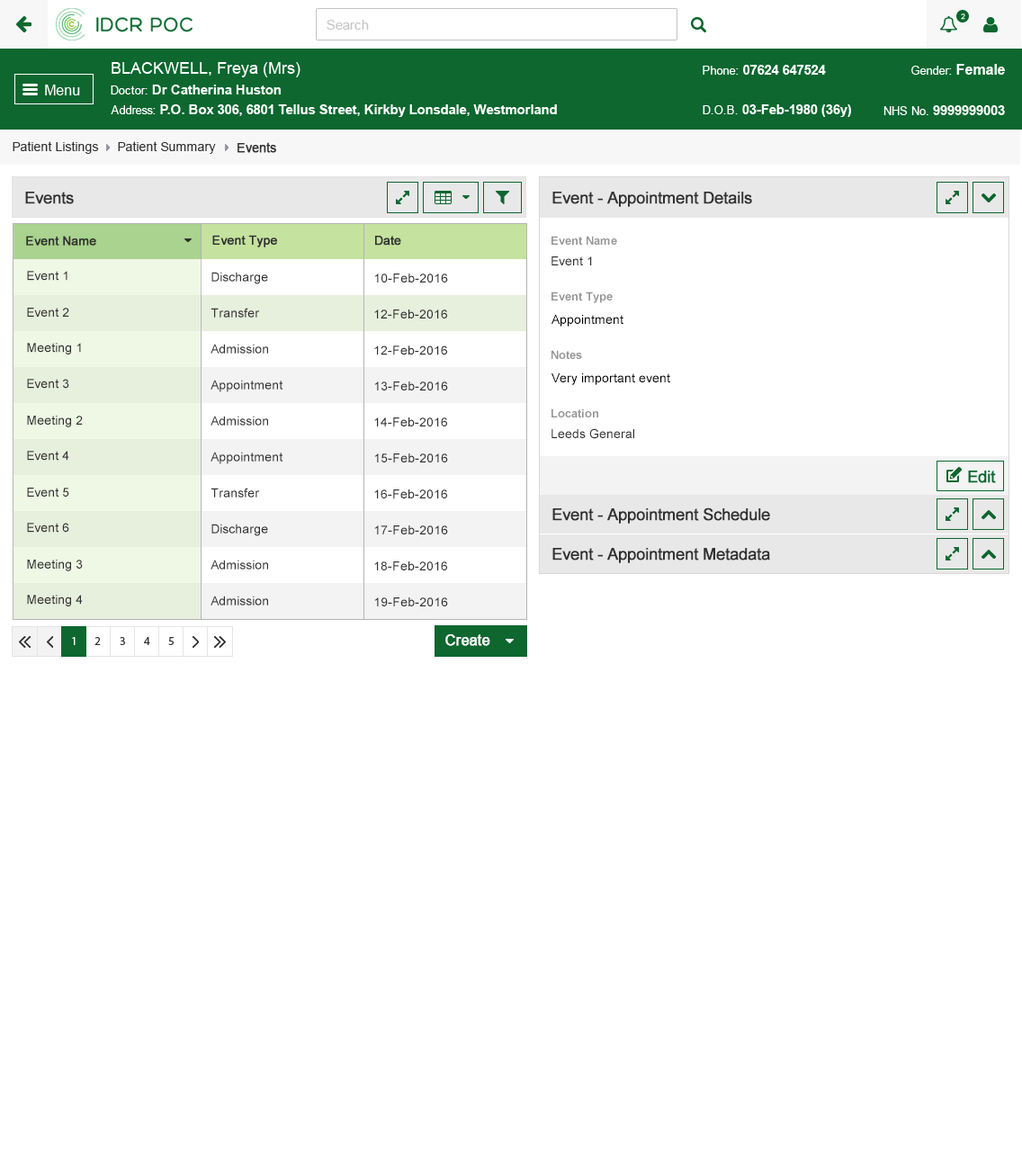
<style>
.page{position:relative;width:1022px;height:1166px;background:#ffffff}
.page>*{position:absolute;margin:0}
.t1{font:12.6px "ArialMT";color:#313131}
.t2{font:12.6px "ArialMT";color:#313131;font-weight:bold}
.t3{font:16.2px "ArialMT";color:#303030;font-weight:bold}
.t4{font:12.6px "ArialMT";color:#303030;font-weight:bold}
.t5{font:11.7px "Arial-BoldMT";color:#959595}
.t6{font:12.6px "ArialMT";color:#303030}
.t7{font:12.6px "ArialMT";color:#000000}
.t8{font:14.4px "ArialMT";color:#ffffff;font-weight:bold}
</style>
<div class="page">
<p class="t1" style="left:13px;top:141px;width:86px;height:13px">Patient Listings</p>
<p class="t1" style="left:118px;top:141px;width:98px;height:13px">Patient Summary</p>
<p class="t2" style="left:238px;top:142px;width:38px;height:11px">Events</p>
<p class="t3" style="left:25px;top:192px;width:49px;height:12px">Events</p>
<p class="t3" style="left:553px;top:192px;width:199px;height:15px">Event - Appointment Details</p>
<p class="t4" style="left:26px;top:236px;width:70px;height:10px">Event Name</p>
<p class="t4" style="left:212px;top:235px;width:65px;height:12px">Event Type</p>
<p class="t4" style="left:375px;top:236px;width:26px;height:10px">Date</p>
<p class="t5" style="left:552px;top:236px;width:65px;height:9px">Event Name</p>
<p class="t6" style="left:552px;top:256px;width:40px;height:9px">Event 1</p>
<p class="t6" style="left:27px;top:271px;width:40px;height:10px">Event 1</p>
<p class="t6" style="left:211px;top:272px;width:57px;height:12px">Discharge</p>
<p class="t6" style="left:374px;top:274px;width:74px;height:9px">10-Feb-2016</p>
<p class="t5" style="left:552px;top:292px;width:61px;height:11px">Event Type</p>
<p class="t6" style="left:27px;top:308px;width:42px;height:9px">Event 2</p>
<p class="t6" style="left:211px;top:308px;width:49px;height:10px">Transfer</p>
<p class="t6" style="left:374px;top:310px;width:73px;height:9px">12-Feb-2016</p>
<p class="t7" style="left:552px;top:315px;width:72px;height:12px">Appointment</p>
<p class="t6" style="left:27px;top:343px;width:54px;height:12px">Meeting 1</p>
<p class="t6" style="left:211px;top:344px;width:57px;height:10px">Admission</p>
<p class="t6" style="left:374px;top:346px;width:73px;height:9px">12-Feb-2016</p>
<p class="t5" style="left:552px;top:350px;width:30px;height:9px">Notes</p>
<p class="t7" style="left:552px;top:373px;width:118px;height:12px">Very important event</p>
<p class="t6" style="left:27px;top:379px;width:42px;height:10px">Event 3</p>
<p class="t6" style="left:211px;top:380px;width:72px;height:12px">Appointment</p>
<p class="t6" style="left:374px;top:382px;width:74px;height:9px">13-Feb-2016</p>
<p class="t5" style="left:552px;top:409px;width:46px;height:9px">Location</p>
<p class="t6" style="left:27px;top:416px;width:56px;height:11px">Meeting 2</p>
<p class="t6" style="left:211px;top:416px;width:57px;height:10px">Admission</p>
<p class="t6" style="left:374px;top:418px;width:73px;height:9px">14-Feb-2016</p>
<p class="t6" style="left:552px;top:428px;width:82px;height:11px">Leeds General</p>
<p class="t6" style="left:27px;top:451px;width:42px;height:10px">Event 4</p>
<p class="t6" style="left:211px;top:452px;width:72px;height:12px">Appointment</p>
<p class="t6" style="left:374px;top:454px;width:74px;height:9px">15-Feb-2016</p>
<p class="t6" style="left:27px;top:488px;width:42px;height:9px">Event 5</p>
<p class="t6" style="left:211px;top:488px;width:49px;height:10px">Transfer</p>
<p class="t6" style="left:374px;top:490px;width:73px;height:9px">16-Feb-2016</p>
<p class="t3" style="left:553px;top:508px;width:217px;height:16px">Event - Appointment Schedule</p>
<p class="t6" style="left:27px;top:523px;width:42px;height:10px">Event 6</p>
<p class="t6" style="left:211px;top:524px;width:57px;height:12px">Discharge</p>
<p class="t6" style="left:374px;top:526px;width:74px;height:9px">17-Feb-2016</p>
<p class="t3" style="left:553px;top:548px;width:217px;height:15px">Event - Appointment Metadata</p>
<p class="t6" style="left:27px;top:560px;width:56px;height:11px">Meeting 3</p>
<p class="t6" style="left:211px;top:560px;width:57px;height:10px">Admission</p>
<p class="t6" style="left:374px;top:562px;width:73px;height:9px">18-Feb-2016</p>
<p class="t6" style="left:27px;top:595px;width:56px;height:12px">Meeting 4</p>
<p class="t6" style="left:211px;top:596px;width:57px;height:10px">Admission</p>
<p class="t6" style="left:374px;top:598px;width:74px;height:9px">19-Feb-2016</p>
<p class="t8" style="left:445px;top:634px;width:45px;height:12px">Create</p>
</div>
